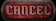
<style>
.page{position:relative;width:56px;height:21px}
.page>*{position:absolute;margin:0}
.t1{font:11.2px "MedievalTimes";color:#af6060;scale:1.37 1}
</style>
<div class="page">
<p class="t1" style="left:5px;top:5px;width:46px;height:11px">CANCEL</p>
</div>
